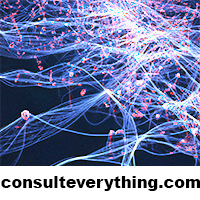
<style>
.page{position:relative;width:200px;height:200px}
.page>*{position:absolute;margin:0}
.t1{font:16px "Arial-Black";color:#000000}
</style>
<div class="page">
<p class="t1" style="left:1px;top:176px;width:199px;height:15px">consulteverything.com</p>
</div>
